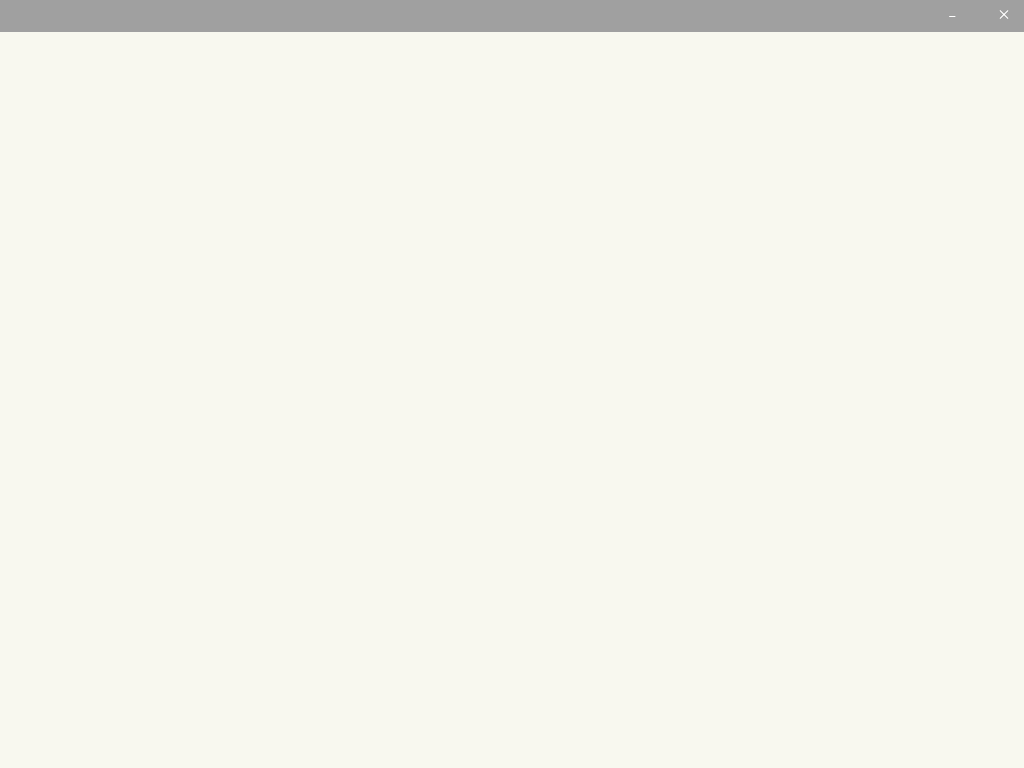
<style>
.page{position:relative;width:1024px;height:768px;background:#f8f8ef}
.page>*{position:absolute;margin:0}
.t1{font:20.8px "DengXian-Regular";color:#ffffff}
</style>
<div class="page">
<p class="t1" style="left:949px;top:16px;width:7px;height:1px">-</p>
<p class="t1" style="left:999px;top:10px;width:10px;height:9px">×</p>
</div>
